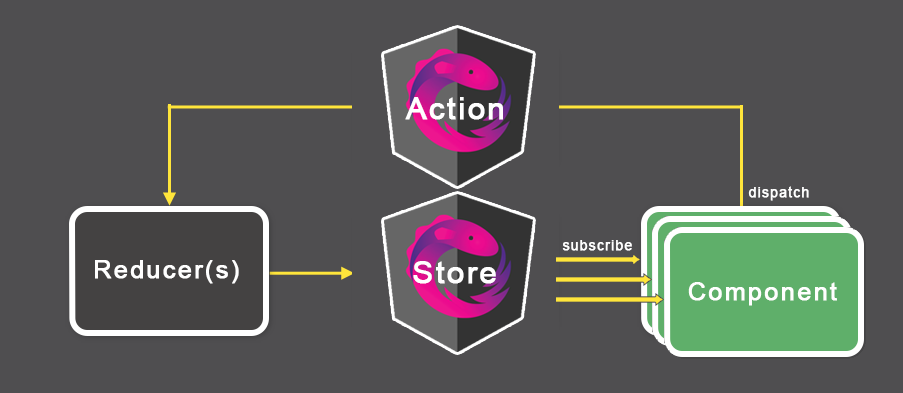
<style>
.page{position:relative;width:903px;height:393px;background:#4f4e50}
.page>*{position:absolute;margin:0}
.t1{font:30.4px "ArialMT";letter-spacing:0.06em;color:#ffffff;font-weight:bold}
.t2{font:14px "ArialMT";letter-spacing:0.06em;color:#ffffff;font-weight:bold}
.t3{font:25.5px "ArialMT";letter-spacing:0.06em;color:#ffffff;font-weight:bold}
</style>
<div class="page">
<p class="t1" style="left:405px;top:97px;width:98px;height:23px">Action</p>
<p class="t2" style="left:748px;top:186px;width:61px;height:15px">dispatch</p>
<p class="t2" style="left:562px;top:240px;width:70px;height:11px">subscribe</p>
<p class="t3" style="left:95px;top:260px;width:144px;height:24px">Reducer(s)</p>
<p class="t1" style="left:413px;top:261px;width:83px;height:23px">Store</p>
<p class="t3" style="left:688px;top:282px;width:149px;height:24px">Component</p>
</div>
